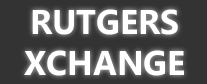
<style>
.page{position:relative;width:207px;height:84px;background:#333333}
.page>*{position:absolute;margin:0}
.t1{font:34.3px "MicrosoftNewTaiLue-Bold";color:#ffffff}
</style>
<div class="page">
<p class="t1" style="left:24px;top:9px;width:160px;height:67px;text-align:center">RUTGERS<br>XCHANGE</p>
</div>
